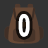
<style>
.page{position:relative;width:48px;height:48px;background:#333333}
.page>*{position:absolute;margin:0}
.t1{font:30px "ArialRoundedMTBold";letter-spacing:0.12em;color:#ffffff;font-weight:bold;scale:0.67 1}
</style>
<div class="page">
<p class="t1" style="left:18px;top:14px;width:12px;height:23px">0</p>
</div>
